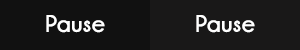
<style>
.page{position:relative;width:300px;height:50px;background:#191818}
.page>*{position:absolute;margin:0}
.t1{font:24px "Champagne&Limousines-Bold";letter-spacing:0.02em;color:#ffffff}
</style>
<div class="page">
<p class="t1" style="left:46px;top:15px;width:59px;height:18px">Pause</p>
<p class="t1" style="left:196px;top:15px;width:59px;height:18px">Pause</p>
</div>
